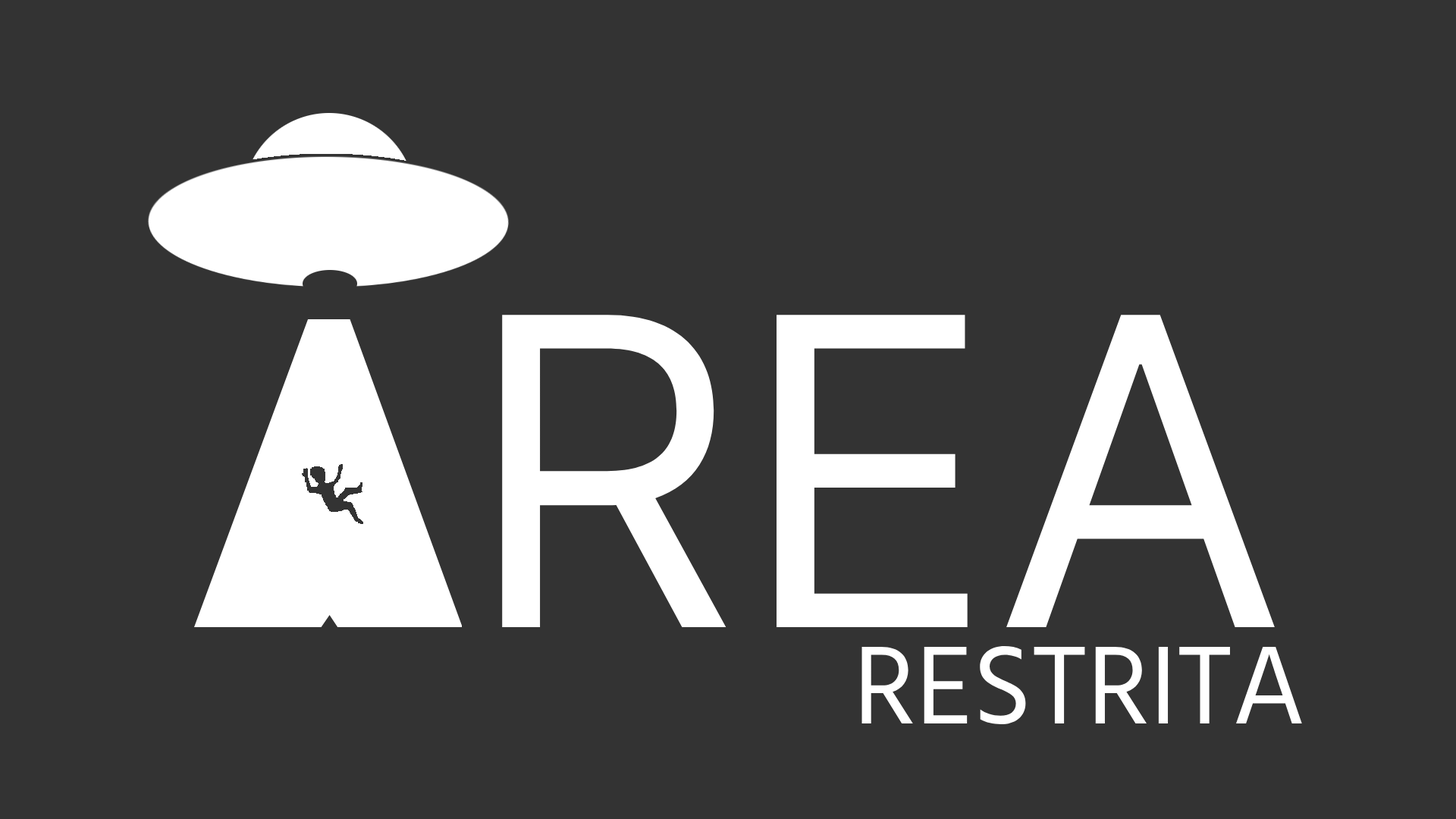
<style>
.page{position:relative;width:1456px;height:819px;background:#333333}
.page>*{position:absolute;margin:0}
.t1{font:429.2px "Inter-Regular";color:#ffffff}
.t2{font:113.7px "Hind-Regular";color:#ffffff}
</style>
<div class="page">
<p class="t1" style="left:502px;top:315px;width:773px;height:312px">REA</p>
<p class="t2" style="left:861px;top:646px;width:441px;height:79px">RESTRITA</p>
</div>
